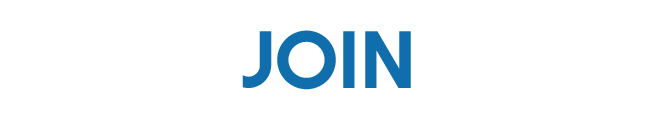
<style>
.page{position:relative;width:654px;height:120px;background:#ffffff}
.page>*{position:absolute;margin:0}
.t1{font:81px "Righteous-Regular";color:#106ead}
</style>
<div class="page">
<p class="t1" style="left:242px;top:30px;width:169px;height:60px">JOIN</p>
</div>
